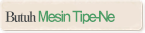
<style>
.page{position:relative;width:145px;height:33px;background:#f0e4d9}
.page>*{position:absolute;margin:0}
.t1{font:14px "GothicMB101Pro-DeBold";letter-spacing:-0.12em;color:#4d9e68;scale:0.85 1}
.t2{font:14px "RyuminPro-ExBold";letter-spacing:-0.12em;color:#424648;scale:0.95 1}
</style>
<div class="page">
<p class="t1" style="left:5px;top:10px;width:110px;height:14px"><span class="t2">Butuh </span>Mesin Tipe-Ne</p>
</div>
